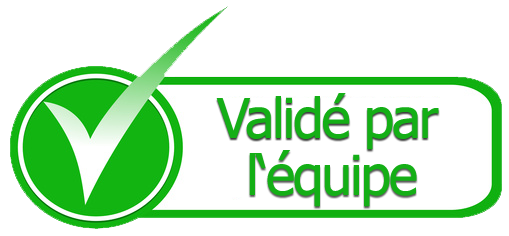
<style>
.page{position:relative;width:509px;height:236px;background:#ffffff}
.page>*{position:absolute;margin:0}
.t1{font:55px "Tahoma";letter-spacing:-0.037em;color:#14af16}
</style>
<div class="page">
<p class="t1" style="left:216px;top:93px;width:223px;height:57px">Validé par</p>
<p class="t1" style="left:249px;top:150px;width:168px;height:57px">l‘équipe</p>
</div>
